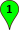
<style>
.page{position:relative;width:19px;height:30px;background:#00ff00}
.page>*{position:absolute;margin:0}
.t1{font:12px "Calibri-Bold";color:#000000}
</style>
<div class="page">
<p class="t1" style="left:7px;top:5px;width:5px;height:8px">1</p>
</div>
